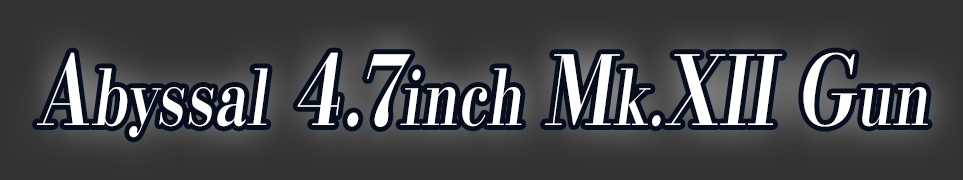
<style>
.page{position:relative;width:963px;height:180px;background:#333333}
.page>*{position:absolute;margin:0}
.t1{font:76.8px "KochoStd-Heavy";letter-spacing:0.02em;color:#ffffff;font-style:italic;scale:0.75 1}
.t2{font:96px "KochoStd-Heavy";letter-spacing:0.02em;color:#ffffff;font-style:italic;scale:0.75 1}
</style>
<div class="page">
<p class="t1" style="left:37px;top:52px;width:891px;height:86px"><span class="t2">A</span>byssal<span class="t2"> 4.7</span>inch <span class="t2">M</span>k.<span class="t2">XII G</span>un</p>
</div>
